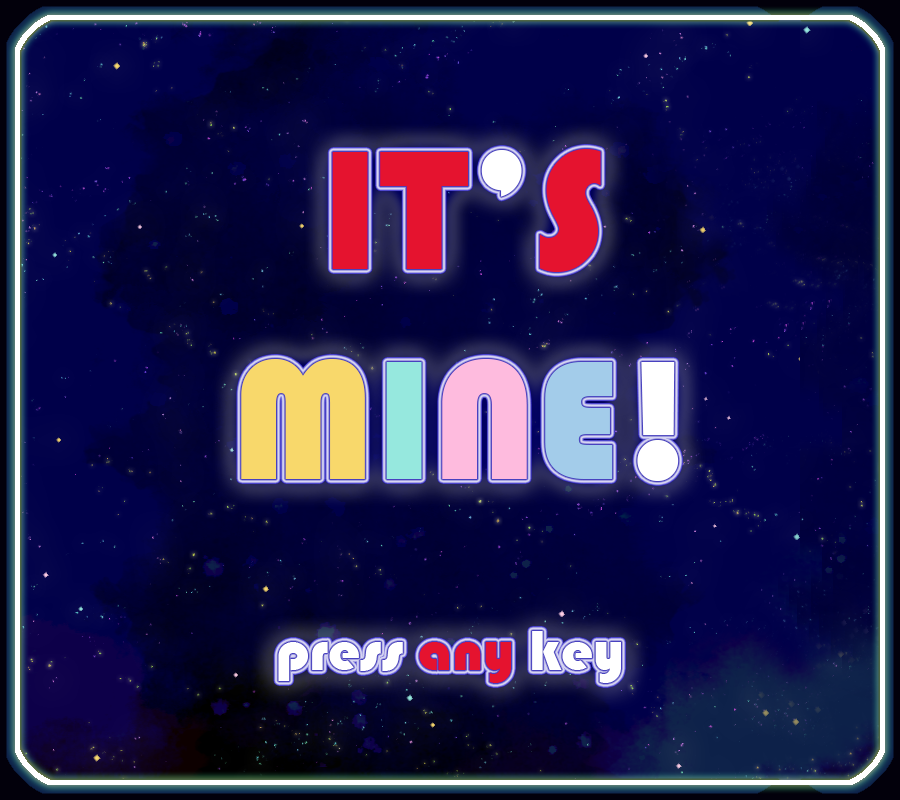
<style>
.page{position:relative;width:900px;height:800px}
.page>*{position:absolute;margin:0}
.t1{font:175px "Bauhaus93";color:#e5132f}
.t2{font:175px "Bauhaus93";color:#ffffff}
.t3{font:175px "Bauhaus93";color:#f8d86b}
.t4{font:175px "Bauhaus93";color:#96e8de}
.t5{font:175px "Bauhaus93";color:#febbde}
.t6{font:175px "Bauhaus93";color:#a3ccea}
.t7{font:58.3px "Bauhaus93";color:#ffffff}
.t8{font:58.3px "Bauhaus93";color:#e5132f}
</style>
<div class="page">
<p class="t1" style="left:241px;top:149px;width:438px;height:332px;text-align:center">IT<span class="t2">’</span>S<br><span class="t3">M</span><span class="t4">I</span><span class="t5">N</span><span class="t6">E</span><span class="t2">!</span></p>
<p class="t7" style="left:278px;top:631px;width:343px;height:52px">press <span class="t8">any </span>key</p>
</div>
